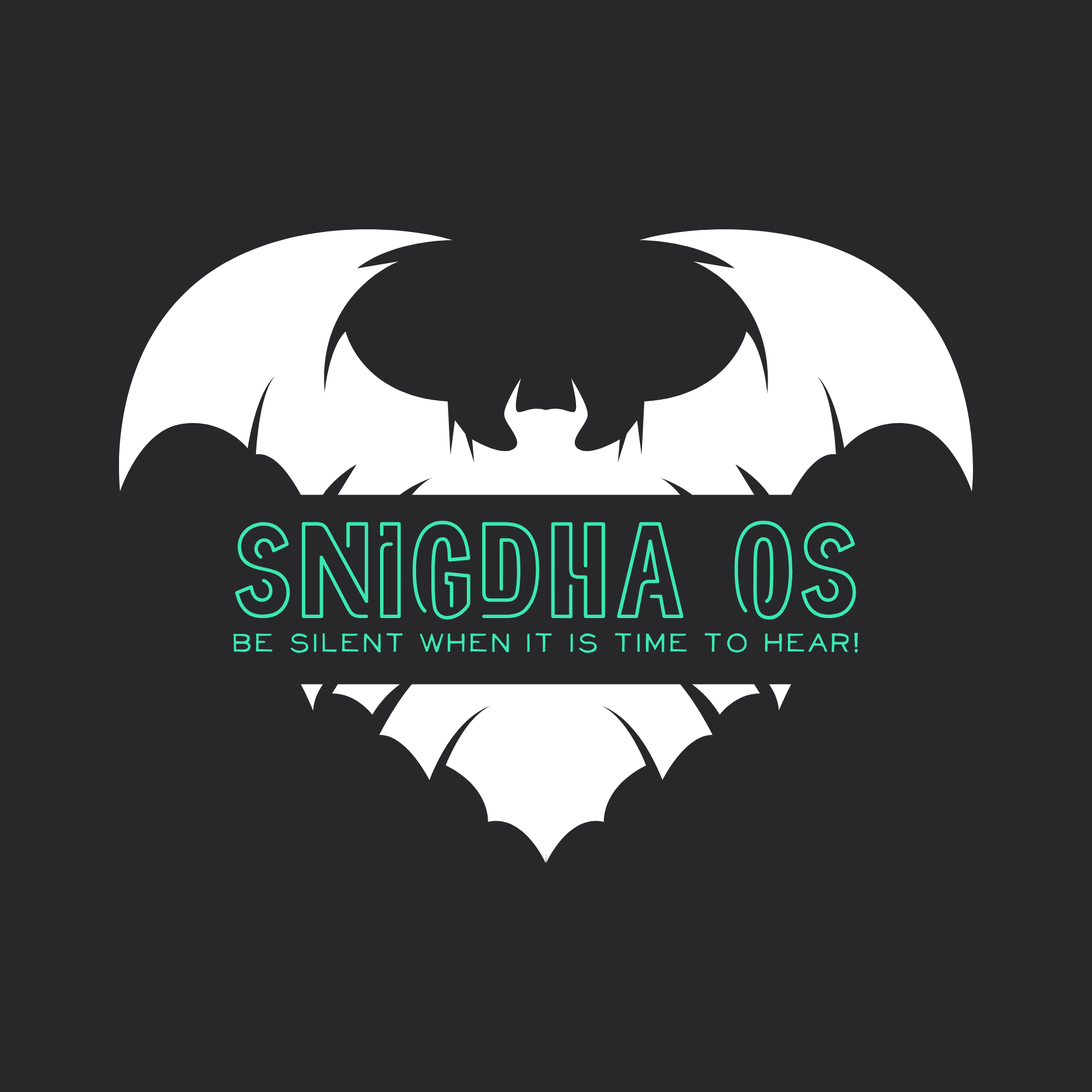
<style>
.page{position:relative;width:1092px;height:1092px;background:#28282b}
.page>*{position:absolute;margin:0}
.t1{font:119.9px "Neoneon";color:#3be8b0}
.t2{font:31.2px "NeoRetroFill";color:#3be8b0}
</style>
<div class="page">
<p class="t1" style="left:235px;top:520px;width:621px;height:100px">SNIGDHA OS</p>
<p class="t2" style="left:233px;top:633px;width:625px;height:20px">be silent when it is time to hear!</p>
</div>
